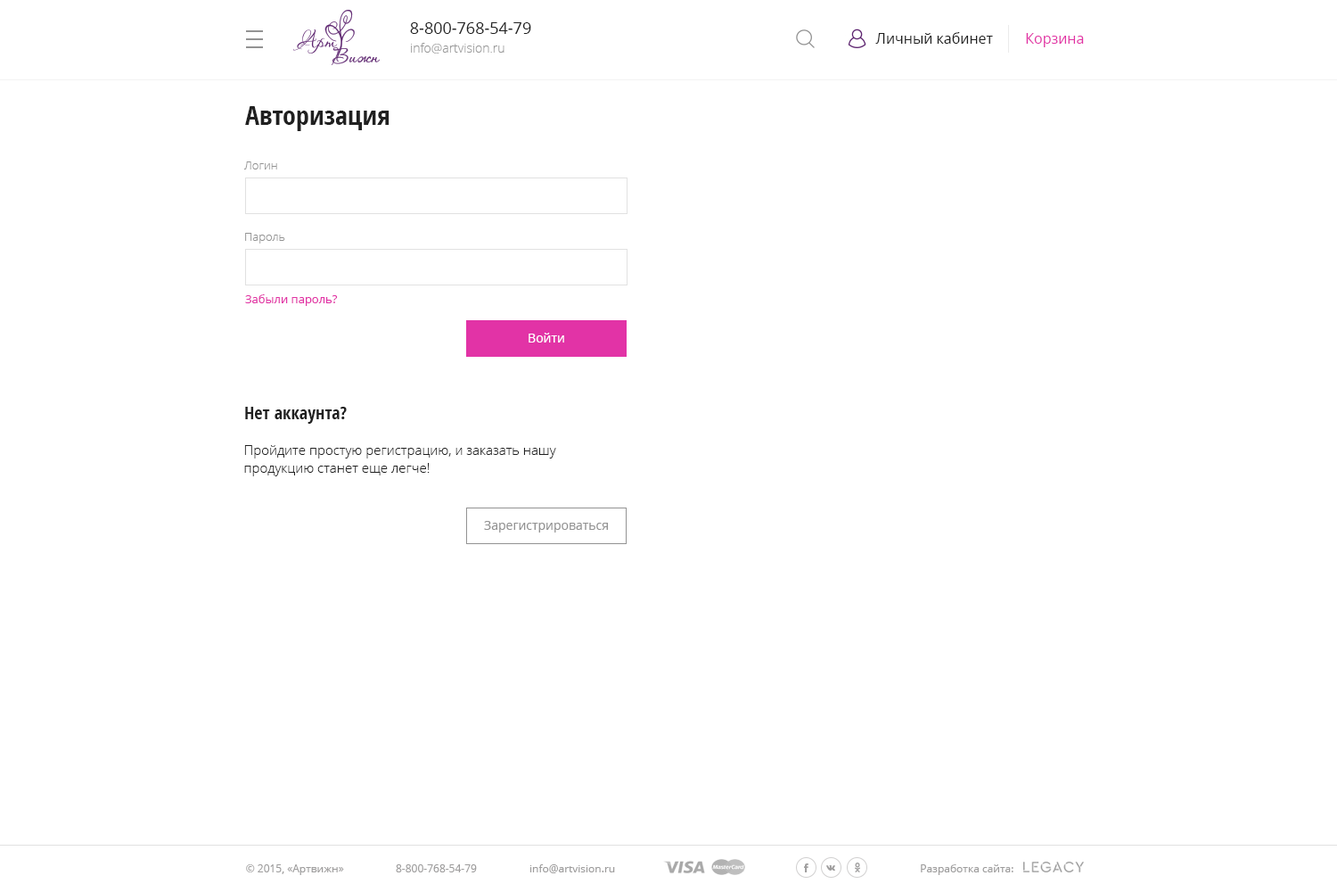
<style>
.page{position:relative;width:1337px;height:892px;background:#ffffff}
.page>*{position:absolute;margin:0}
.t1{font:16px "OpenSans";color:#202020}
.t2{font:14.3px "OpenSans";color:#202020}
.t3{font:14.3px "OpenSans";color:#e233a6}
.t4{font:12.5px "OpenSans-Light";color:#999999}
.t5{font:26.7px "OpenSans-CondensedBold";color:#202020}
.t6{font:11.6px "OpenSans-Light";color:#939393}
.t7{font:11.6px "OpenSans";color:#e233a6}
.t8{font:12.5px "OpenSans";color:#ffffff}
.t9{font:17.8px "OpenSans-CondensedBold";color:#202020}
.t10{font:13.4px/17.8px "OpenSans-Light";color:#202020}
.t11{font:12.5px "OpenSans";color:#939393}
.t12{font:10.7px "OpenSans";color:#9e9d9d}
</style>
<div class="page">
<p class="t1" style="left:410px;top:22px;width:121px;height:12px">8-800-768-54-79</p>
<p class="t2" style="left:876px;top:32px;width:117px;height:12px">Личный кабинет</p>
<p class="t3" style="left:1026px;top:33px;width:58px;height:14px">Корзина</p>
<p class="t4" style="left:411px;top:43px;width:94px;height:10px">info@artvision.ru</p>
<p class="t5" style="left:245px;top:106px;width:145px;height:25px">Авторизация</p>
<p class="t6" style="left:243px;top:161px;width:34px;height:8px">Логин</p>
<p class="t6" style="left:245px;top:233px;width:40px;height:10px">Пароль</p>
<p class="t7" style="left:245px;top:294px;width:93px;height:12px">Забыли пароль?</p>
<p class="t8" style="left:529px;top:333px;width:35px;height:9px">Войти</p>
<p class="t9" style="left:245px;top:407px;width:102px;height:17px">Нет аккаунта?</p>
<p class="t10" style="left:244px;top:445px;width:312px;height:31px">Пройдите простую регистрацию, и заказать нашу продукцию станет еще легче!</p>
<p class="t11" style="left:484px;top:521px;width:124px;height:11px">Зарегистрироваться</p>
<p class="t12" style="left:246px;top:864px;width:98px;height:11px">© 2015, «Артвижн»</p>
<p class="t12" style="left:396px;top:864px;width:81px;height:8px">8-800-768-54-79</p>
<p class="t12" style="left:530px;top:864px;width:85px;height:9px">info@artvision.ru</p>
<p class="t12" style="left:921px;top:864px;width:93px;height:11px">Разработка сайта:</p>
</div>
